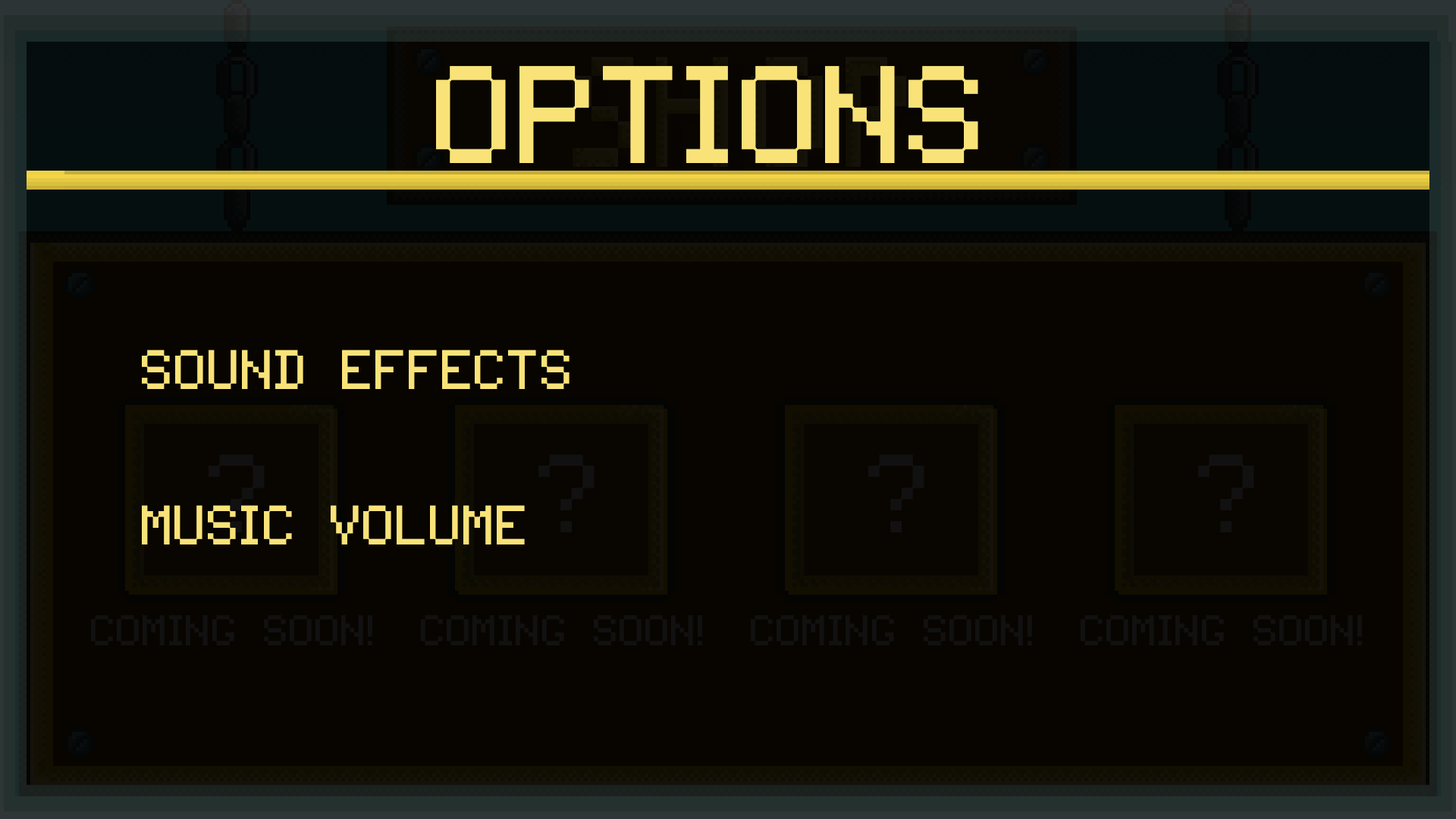
<style>
.page{position:relative;width:1456px;height:819px;background:#080501}
.page>*{position:absolute;margin:0}
.t1{font:142.2px "Tandysoft";color:#f9e379}
.t2{font:56.9px "Tandysoft";color:#f9e379}
</style>
<div class="page">
<p class="t1" style="left:436px;top:66px;width:542px;height:97px">options</p>
<p class="t2" style="left:142px;top:350px;width:428px;height:39px">sound effects</p>
<p class="t2" style="left:142px;top:505px;width:383px;height:39px">music volume</p>
</div>
